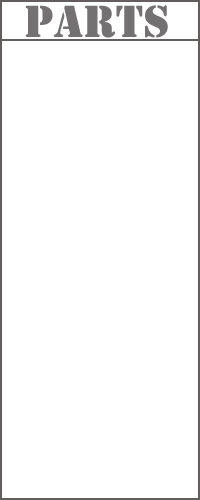
<style>
.page{position:relative;width:200px;height:500px;background:#ffffff}
.page>*{position:absolute;margin:0}
.t1{font:41.7px "StencilStd";color:#737171}
</style>
<div class="page">
<p class="t1" style="left:25px;top:5px;width:143px;height:33px">PARTS</p>
</div>
